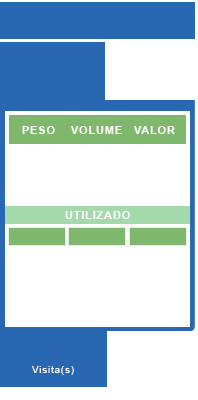
<style>
.page{position:relative;width:198px;height:400px;background:#ffffff}
.page>*{position:absolute;margin:0}
.t1{font:11px "Arial-BoldMT";letter-spacing:0.076em;color:#ffffff}
</style>
<div class="page">
<p class="t1" style="left:22px;top:126px;width:33px;height:8px">PESO</p>
<p class="t1" style="left:71px;top:126px;width:51px;height:8px">VOLUME</p>
<p class="t1" style="left:134px;top:126px;width:41px;height:8px">VALOR</p>
<p class="t1" style="left:65px;top:211px;width:65px;height:8px">UTILIZADO</p>
</div>
